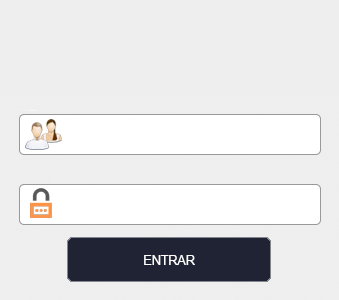
<style>
.page{position:relative;width:339px;height:300px;background:#eeeeee}
.page>*{position:absolute;margin:0}
.t1{font:12.5px "ArialMT";color:#ffffff}
</style>
<div class="page">
<p class="t1" style="left:144px;top:255px;width:51px;height:10px">ENTRAR</p>
</div>
